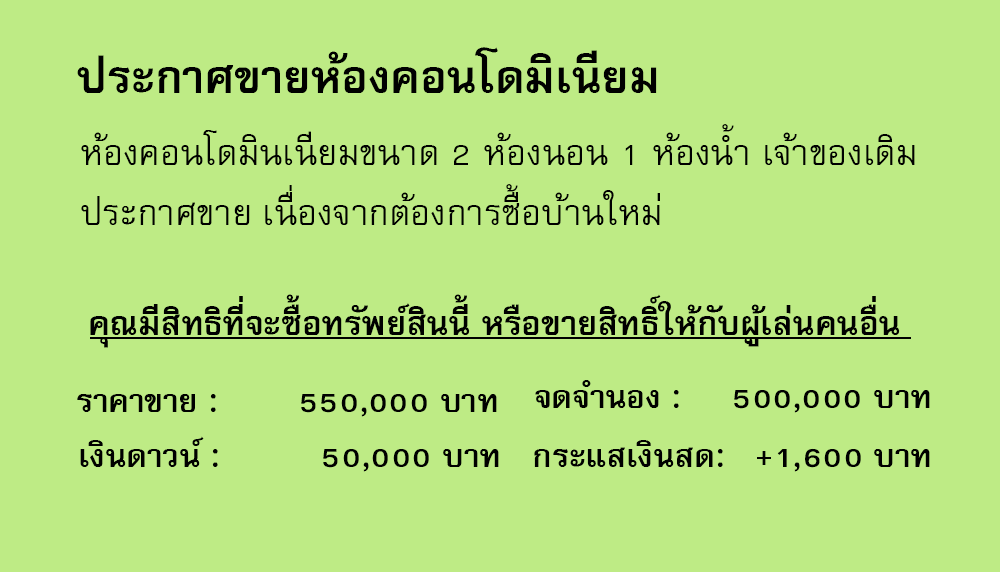
<style>
.page{position:relative;width:1000px;height:572px;background:#beeb85}
.page>*{position:absolute;margin:0}
.t1{font:64px "FreesiaUPCBold";color:#000000}
.t2{font:50px/60px "FreesiaUPC";color:#000000}
.t3{font:47px "FreesiaUPCBold";color:#000000}
.t4{font:45px "FreesiaUPCBold";color:#000000}
</style>
<div class="page">
<p class="t1" style="left:77px;top:47px;width:580px;height:46px">ประกาศขายห้องคอนโดมิเนียม</p>
<p class="t2" style="left:81px;top:124px;width:834px;height:101px">ห้องคอนโดมินเนียมขนาด 2 ห้องนอน 1 ห้องน้ำ เจ้าของเดิม<br>ประกาศขาย เนื่องจากต้องการซื้อบ้านใหม่</p>
<p class="t3" style="left:90px;top:294px;width:810px;height:54px">คุณมีสิทธิที่จะซื้อทรัพย์สินนี้ หรือขายสิทธิ์ให้กับผู้เล่นคนอื่น</p>
<p class="t4" style="left:535px;top:380px;width:395px;height:33px">จดจำนอง :     500,000 บาท</p>
<p class="t4" style="left:77px;top:394px;width:420px;height:23px">ราคาขาย :        550,000 บาท</p>
<p class="t4" style="left:80px;top:436px;width:419px;height:36px">เงินดาวน์ :          50,000 บาท</p>
<p class="t4" style="left:534px;top:440px;width:396px;height:32px">กระแสเงินสด:   +1,600 บาท</p>
</div>
